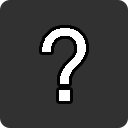
<style>
.page{position:relative;width:128px;height:128px;background:#313131}
.page>*{position:absolute;margin:0}
.t1{font:100px "HelveticaNeueLTPro-Roman";letter-spacing:0.075em;color:#ffffff}
</style>
<div class="page">
<p class="t1" style="left:42px;top:28px;width:44px;height:73px">?</p>
</div>
